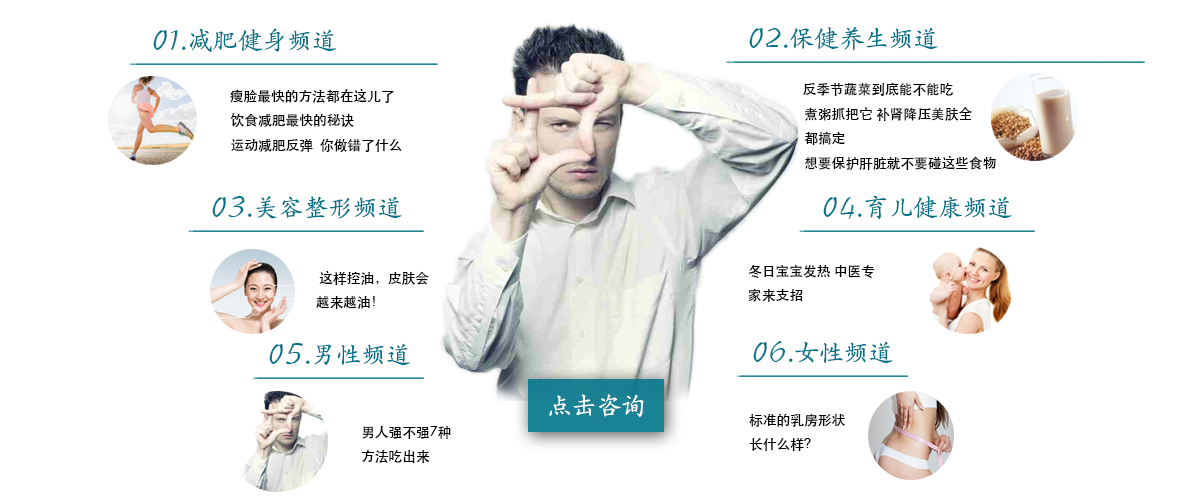
<style>
.page{position:relative;width:1200px;height:500px;background:#ffffff}
.page>*{position:absolute;margin:0}
.t1{font:25px "AdobeKaitiStd-Regular";color:#017489}
.t2{font:33.3px "STLibian-SC-Regular";color:#017489}
.t3{font:33.3px "AdobeKaitiStd-Regular";color:#017489}
.t4{font:13.7px "STHeitiSC-Medium";color:#000000}
.t5{font:25px "AdobeKaitiStd-Regular";color:#ffffff}
</style>
<div class="page">
<p class="t1" style="left:153px;top:28px;width:184px;height:24px"><span class="t2">01</span><span class="t3">.</span>减肥健身频道</p>
<p class="t1" style="left:749px;top:27px;width:189px;height:24px"><span class="t2">02</span><span class="t3">.</span>保健养生频道</p>
<p class="t4" style="left:230px;top:89px;width:164px;height:14px">瘦脸最快的方法都在这儿了</p>
<p class="t4" style="left:803px;top:82px;width:150px;height:14px">反季节蔬菜到底能不能吃</p>
<p class="t4" style="left:230px;top:113px;width:124px;height:14px">饮食减肥最快的秘诀</p>
<p class="t4" style="left:804px;top:107px;width:168px;height:38px">煮粥抓把它 补肾降压美肤全<br>都搞定</p>
<p class="t4" style="left:231px;top:138px;width:171px;height:14px">运动减肥反弹  你做错了什么</p>
<p class="t4" style="left:805px;top:156px;width:191px;height:14px">想要保护肝脏就不要碰这些食物</p>
<p class="t1" style="left:212px;top:196px;width:190px;height:23px"><span class="t2">03</span><span class="t3">.</span>美容整形频道</p>
<p class="t1" style="left:823px;top:195px;width:189px;height:25px"><span class="t2">04</span><span class="t3">.</span>育儿健康频道</p>
<p class="t4" style="left:748px;top:264px;width:127px;height:38px">冬日宝宝发热 中医专<br>家来支招</p>
<p class="t4" style="left:316px;top:271px;width:113px;height:38px">这样控油，皮肤会<br>越来越油！</p>
<p class="t1" style="left:753px;top:341px;width:140px;height:23px"><span class="t2">06</span><span class="t3">.</span>女性频道</p>
<p class="t1" style="left:269px;top:343px;width:142px;height:23px"><span class="t2">05</span><span class="t3">.</span>男性频道</p>
<p class="t5" style="left:549px;top:394px;width:95px;height:23px">点击咨询</p>
<p class="t4" style="left:749px;top:413px;width:96px;height:38px">标准的乳房形状<br>长什么样？</p>
<p class="t4" style="left:361px;top:426px;width:90px;height:37px">男人强不强7种<br>方法吃出来</p>
</div>
